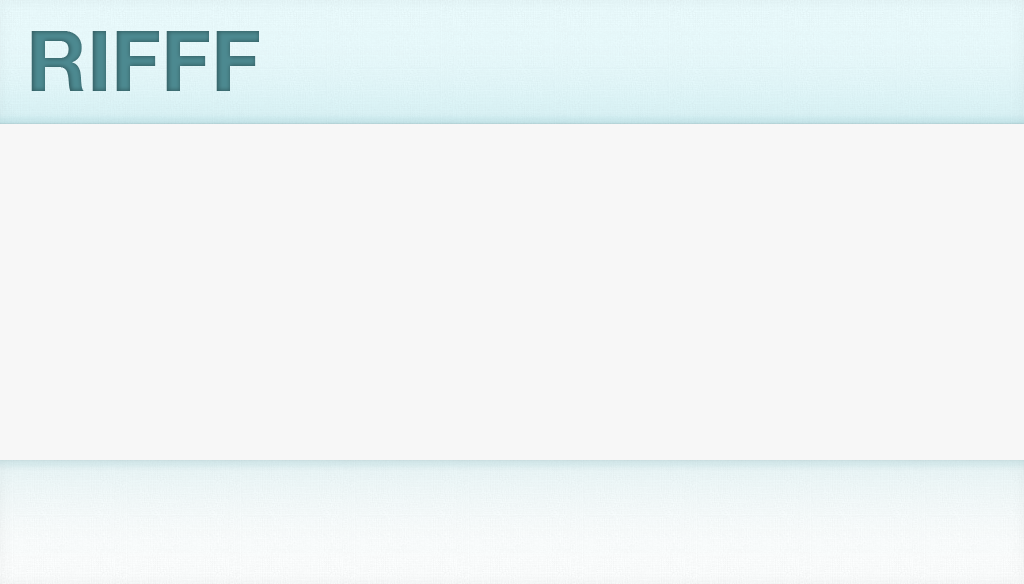
<style>
.page{position:relative;width:1024px;height:584px;background:#f7f7f7}
.page>*{position:absolute;margin:0}
.t1{font:84px "HelveticaNeue-Bold";color:#4c8990}
</style>
<div class="page">
<p class="t1" style="left:31px;top:31px;width:228px;height:60px">RIFFF</p>
</div>
